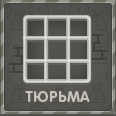
<style>
.page{position:relative;width:116px;height:116px}
.page>*{position:absolute;margin:0}
.t1{font:15px "RotondaC-Bold";letter-spacing:0.04em;color:#c8c2b8;text-transform:uppercase}
</style>
<div class="page">
<p class="t1" style="left:25px;top:91px;width:65px;height:11px">Тюрьма</p>
</div>
